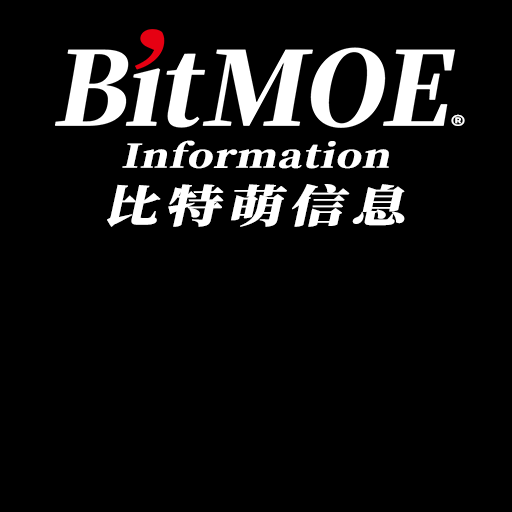
<style>
.page{position:relative;width:512px;height:512px;background:#000000}
.page>*{position:absolute;margin:0}
.t1{font:24px "SourceHanSansCN-Regular";color:#ffffff;font-weight:bold;scale:1.25 1}
.t2{font:32px "SourceHanSerifSC-Heavy";color:#ffffff;font-weight:bold;font-style:italic;scale:1.25 1}
.t3{font:44px "SourceHanSerifSC-Heavy";letter-spacing:0.1em;color:#ffffff;font-weight:bold;font-style:italic;scale:1.25 1}
</style>
<div class="page">
<p class="t1" style="left:451px;top:114px;width:14px;height:12px">®</p>
<p class="t2" style="left:122px;top:140px;width:267px;height:29px">Information</p>
<p class="t3" style="left:107px;top:184px;width:298px;height:43px">比特萌信息</p>
</div>
